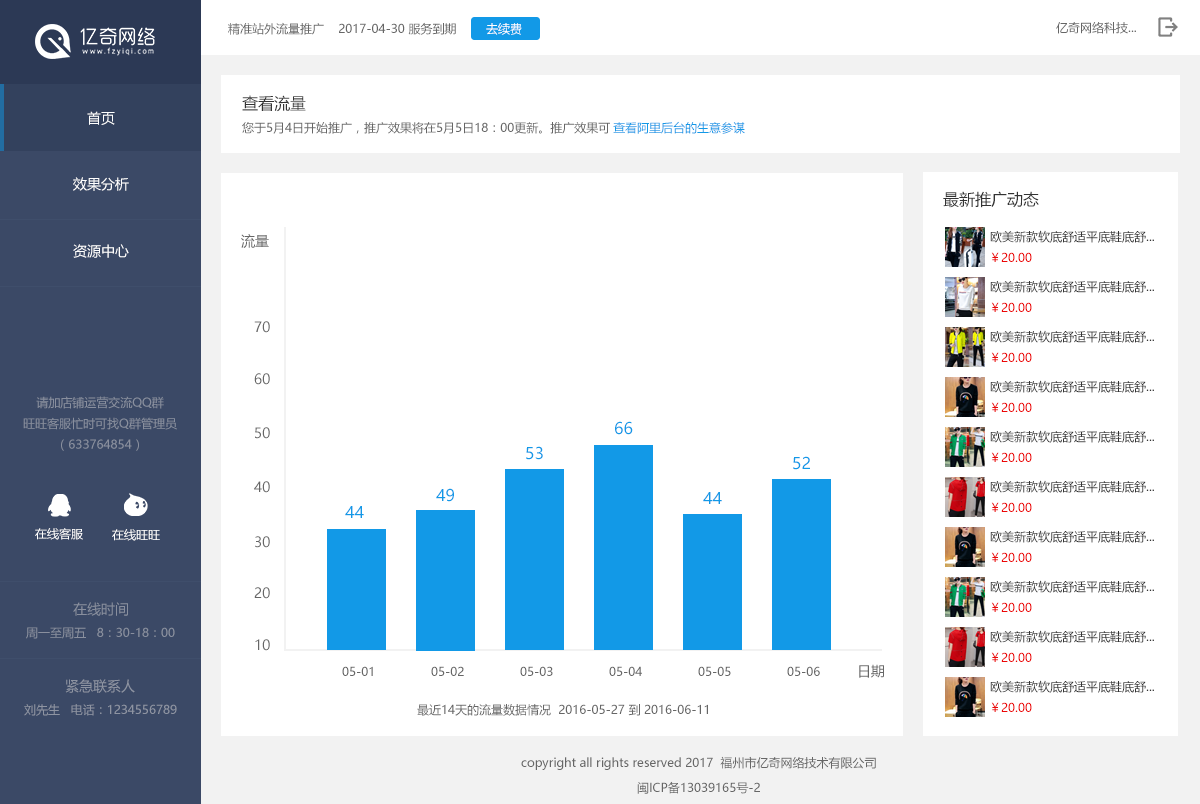
<style>
.page{position:relative;width:1200px;height:804px;background:#ffffff}
.page>*{position:absolute;margin:0}
.t1{font:12px "MicrosoftYaHei";color:#666666}
.t2{font:12px "MicrosoftYaHei";color:#ffffff}
.t3{font:16px "MicrosoftYaHei";color:#333333}
.t4{font:14px "MicrosoftYaHei";color:#ffffff}
.t5{font:12px "MicrosoftYaHei";color:#1299e7}
.t6{font:12px "MicrosoftYaHei";color:#333333}
.t7{font:14px "MicrosoftYaHei";color:#666666}
.t8{font:12px "MicrosoftYaHei";color:#ec0606}
.t9{font:12px "MicrosoftYaHei";color:#898f9e}
.t10{font:16px "MicrosoftYaHei";color:#1299e7}
.t11{font:11.7px "MicrosoftYaHei";color:#ffffff}
.t12{font:14px "MicrosoftYaHei";color:#898f9e}
.t13{font:14px "MicrosoftYaHei";color:#8e94a2}
.t14{font:12px "MicrosoftYaHei";color:#8e94a2}
</style>
<div class="page">
<p class="t1" style="left:228px;top:22px;width:228px;height:13px">精准站外流量推广    2017-04-30 服务到期</p>
<p class="t2" style="left:486px;top:23px;width:36px;height:12px">去续费</p>
<p class="t1" style="left:1056px;top:22px;width:80px;height:12px">亿奇网络科技...</p>
<p class="t3" style="left:242px;top:95px;width:64px;height:17px">查看流量</p>
<p class="t4" style="left:87px;top:111px;width:28px;height:14px">首页</p>
<p class="t1" style="left:242px;top:122px;width:368px;height:12px">您于5月4日开始推广，推广效果将在5月5日18：00更新。推广效果可</p>
<p class="t5" style="left:613px;top:121px;width:132px;height:13px">查看阿里后台的生意参谋</p>
<p class="t4" style="left:73px;top:177px;width:56px;height:14px">效果分析</p>
<p class="t3" style="left:943px;top:191px;width:96px;height:17px">最新推广动态</p>
<p class="t6" style="left:990px;top:230px;width:164px;height:13px">欧美新款软底舒适平底鞋底舒...</p>
<p class="t4" style="left:73px;top:244px;width:56px;height:14px">资源中心</p>
<p class="t7" style="left:241px;top:234px;width:28px;height:14px">流量</p>
<p class="t8" style="left:991px;top:252px;width:41px;height:10px">￥20.00</p>
<p class="t6" style="left:990px;top:280px;width:164px;height:13px">欧美新款软底舒适平底鞋底舒...</p>
<p class="t8" style="left:991px;top:302px;width:41px;height:10px">￥20.00</p>
<p class="t7" style="left:254px;top:321px;width:16px;height:12px">70</p>
<p class="t6" style="left:990px;top:330px;width:164px;height:13px">欧美新款软底舒适平底鞋底舒...</p>
<p class="t8" style="left:991px;top:352px;width:41px;height:10px">￥20.00</p>
<p class="t7" style="left:254px;top:373px;width:16px;height:12px">60</p>
<p class="t6" style="left:990px;top:380px;width:164px;height:13px">欧美新款软底舒适平底鞋底舒...</p>
<p class="t9" style="left:23px;top:396px;width:154px;height:55px;text-align:center">请加店铺运营交流QQ群<br>旺旺客服忙时可找Q群管理员<br>（633764854）</p>
<p class="t8" style="left:991px;top:402px;width:41px;height:10px">￥20.00</p>
<p class="t10" style="left:615px;top:421px;width:18px;height:14px">66</p>
<p class="t7" style="left:255px;top:427px;width:15px;height:12px">50</p>
<p class="t6" style="left:990px;top:430px;width:164px;height:13px">欧美新款软底舒适平底鞋底舒...</p>
<p class="t10" style="left:526px;top:446px;width:17px;height:14px">53</p>
<p class="t10" style="left:793px;top:456px;width:17px;height:14px">52</p>
<p class="t8" style="left:991px;top:452px;width:41px;height:10px">￥20.00</p>
<p class="t7" style="left:254px;top:481px;width:16px;height:12px">40</p>
<p class="t6" style="left:990px;top:480px;width:164px;height:13px">欧美新款软底舒适平底鞋底舒...</p>
<p class="t10" style="left:436px;top:488px;width:18px;height:14px">49</p>
<p class="t10" style="left:703px;top:492px;width:19px;height:12px">44</p>
<p class="t10" style="left:345px;top:506px;width:19px;height:12px">44</p>
<p class="t8" style="left:991px;top:502px;width:41px;height:10px">￥20.00</p>
<p class="t11" style="left:35px;top:528px;width:48px;height:12px">在线客服</p>
<p class="t11" style="left:112px;top:529px;width:48px;height:12px">在线旺旺</p>
<p class="t6" style="left:990px;top:530px;width:164px;height:13px">欧美新款软底舒适平底鞋底舒...</p>
<p class="t7" style="left:255px;top:536px;width:15px;height:12px">30</p>
<p class="t8" style="left:991px;top:552px;width:41px;height:10px">￥20.00</p>
<p class="t6" style="left:990px;top:580px;width:164px;height:13px">欧美新款软底舒适平底鞋底舒...</p>
<p class="t7" style="left:254px;top:587px;width:16px;height:12px">20</p>
<p class="t12" style="left:73px;top:602px;width:55px;height:14px">在线时间</p>
<p class="t8" style="left:991px;top:602px;width:41px;height:10px">￥20.00</p>
<p class="t9" style="left:26px;top:627px;width:149px;height:12px">周一至周五   8：30-18：00</p>
<p class="t6" style="left:990px;top:630px;width:164px;height:13px">欧美新款软底舒适平底鞋底舒...</p>
<p class="t7" style="left:255px;top:639px;width:15px;height:12px">10</p>
<p class="t8" style="left:991px;top:652px;width:41px;height:10px">￥20.00</p>
<p class="t7" style="left:859px;top:664px;width:25px;height:14px">日期</p>
<p class="t1" style="left:342px;top:666px;width:31px;height:10px">05-01</p>
<p class="t1" style="left:431px;top:666px;width:33px;height:10px">05-02</p>
<p class="t1" style="left:520px;top:666px;width:33px;height:10px">05-03</p>
<p class="t1" style="left:609px;top:666px;width:33px;height:10px">05-04</p>
<p class="t1" style="left:698px;top:666px;width:33px;height:10px">05-05</p>
<p class="t1" style="left:787px;top:666px;width:33px;height:10px">05-06</p>
<p class="t13" style="left:65px;top:679px;width:70px;height:14px">紧急联系人</p>
<p class="t6" style="left:990px;top:680px;width:164px;height:13px">欧美新款软底舒适平底鞋底舒...</p>
<p class="t8" style="left:991px;top:702px;width:41px;height:10px">￥20.00</p>
<p class="t14" style="left:24px;top:704px;width:153px;height:12px">刘先生   电话：1234556789</p>
<p class="t1" style="left:417px;top:703px;width:291px;height:13px">最近14天的流量数据情况  2016-05-27 到 2016-06-11</p>
<p class="t1" style="left:521px;top:756px;width:355px;height:14px">copyright all rights reserved 2017  福州市亿奇网络技术有限公司</p>
<p class="t1" style="left:637px;top:781px;width:123px;height:13px">闽ICP备13039165号-2</p>
</div>
